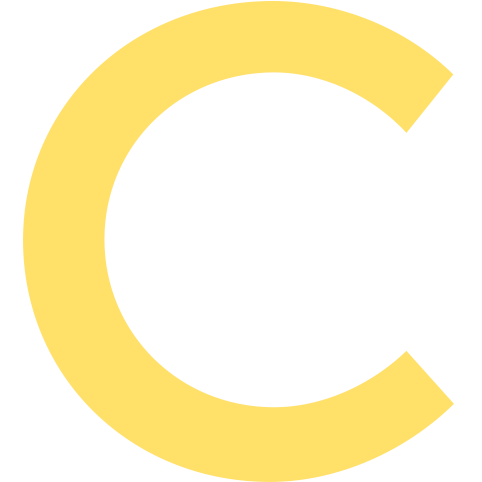
<style>
.page{position:relative;width:482px;height:482px;background:#ffffff}
.page>*{position:absolute;margin:0}
.t1{font:680px "Montserrat-Regular";color:#ffe16a}
</style>
<div class="page">
<p class="t1" style="left:23px;top:0px;width:431px;height:482px">C</p>
</div>
